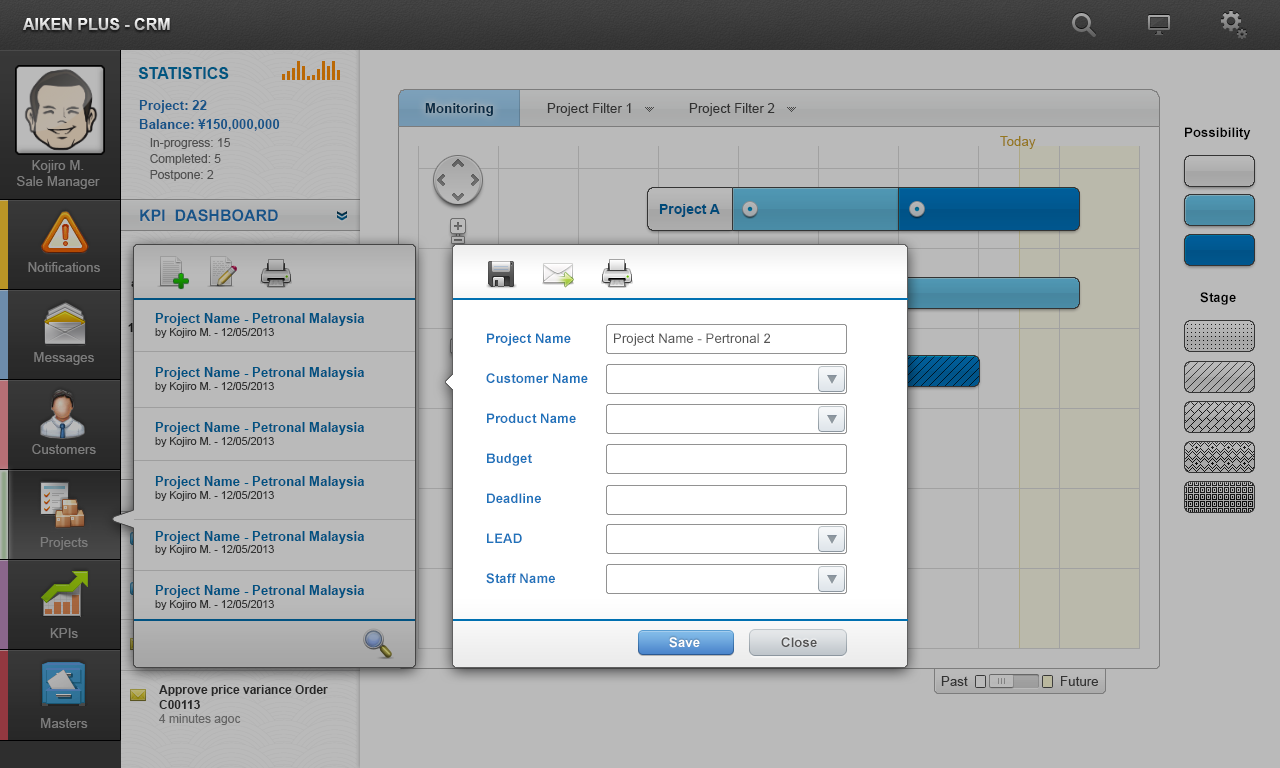
<style>
.page{position:relative;width:1280px;height:768px;background:#bababa}
.page>*{position:absolute;margin:0}
.t1{font:16px "Arial-BoldMT";text-transform:uppercase}
.t2{font:16px "Arial-BoldMT";color:#005680;text-transform:uppercase}
.t3{font:13.3px/18.7px "Arial-BoldMT"}
.t4{font:12px/18.7px "ArialMT"}
.t5{font:12px/16px "ArialMT"}
.t6{font:13.3px "Arial-BoldMT";color:#092c46}
.t7{font:13.3px "ArialMT";color:#464646}
.t8{font:13.3px "ArialMT";color:#95771f}
.t9{font:13.3px "Arial-BoldMT";color:#000000}
.t10{font:13.3px "ArialMT";color:#7c7c7c}
.t11{font:16px "Arial-BoldMT";color:#175488;text-transform:uppercase}
.t12{font:14px "Arial-BoldMT";color:#004a78}
.t13{font:13.3px "Arial-BoldMT";color:#005281}
.t14{font:10.7px "ArialMT";color:#005281}
.t15{font:13.3px/40px "Arial-BoldMT";color:#1f73bb}
.t16{font:13.3px/40px "Arial-BoldMT";color:#1f73bb;text-transform:uppercase}
.t17{font:13.3px "ArialMT";color:#555555}
.t18{font:13.3px "Arial-BoldMT";color:#ffffff}
.t19{font:13.3px "Arial-BoldMT";color:#555555}
</style>
<div class="page">
<p class="t1" style="left:23px;top:18px;width:147px;height:12px">AIKEN Plus - CRM</p>
<p class="t2" style="left:138px;top:67px;width:91px;height:12px">Statistics</p>
<p class="t3" style="left:139px;top:100px;width:141px;height:81px">Project: 22<br>Balance: ¥150,000,000<br><span class="t4">In-progress: 15<br></span><span class="t5">Completed: 5<br>Postpone: 2</span></p>
<p class="t6" style="left:425px;top:103px;width:68px;height:13px">Monitoring</p>
<p class="t7" style="left:547px;top:103px;width:84px;height:13px">Project Filter 1</p>
<p class="t7" style="left:689px;top:103px;width:86px;height:13px">Project Filter 2</p>
<p class="t8" style="left:1000px;top:136px;width:36px;height:13px">Today</p>
<p class="t9" style="left:1185px;top:127px;width:66px;height:13px">Possibility</p>
<p class="t10" style="left:17px;top:160px;width:83px;height:29px;text-align:center">Kojiro M.<br>Sale Manager</p>
<p class="t11" style="left:140px;top:209px;width:138px;height:13px">KPI  Dashboard</p>
<p class="t12" style="left:659px;top:204px;width:61px;height:13px">Project A</p>
<p class="t10" style="left:28px;top:262px;width:72px;height:10px">Notifications</p>
<p class="t9" style="left:1200px;top:292px;width:36px;height:13px">Stage</p>
<p class="t13" style="left:155px;top:313px;width:209px;height:297px">Project Name - Petronal Malaysia<br><span class="t14">by Kojiro M. - 12/05/2013<br><br><br></span>Project Name - Petronal Malaysia<br><span class="t14">by Kojiro M. - 12/05/2013<br><br><br></span>Project Name - Petronal Malaysia<br><span class="t14">by Kojiro M. - 12/05/2013<br><br><br></span>Project Name - Petronal Malaysia<br><span class="t14">by Kojiro M. - 12/05/2013<br><br><br></span>Project Name - Petronal Malaysia<br><span class="t14">by Kojiro M. - 12/05/2013<br><br><br></span>Project Name - Petronal Malaysia<br><span class="t14">by Kojiro M. - 12/05/2013</span></p>
<p class="t15" style="left:486px;top:333px;width:102px;height:251px"><span class="t16">P</span>roject Name<br>Customer Name<br>Product Name<br>Budget<br>Deadline<br>LEAD<br>Staff Name</p>
<p class="t17" style="left:614px;top:333px;width:156px;height:13px">Project Name - Pertronal 2</p>
<p class="t10" style="left:34px;top:352px;width:60px;height:13px">Messages</p>
<p class="t10" style="left:32px;top:444px;width:64px;height:10px">Customers</p>
<p class="t10" style="left:40px;top:537px;width:48px;height:13px">Projects</p>
<p class="t10" style="left:50px;top:628px;width:28px;height:10px">KPIs</p>
<p class="t18" style="left:669px;top:637px;width:31px;height:11px">Save</p>
<p class="t19" style="left:781px;top:637px;width:36px;height:10px">Close</p>
<p class="t7" style="left:941px;top:676px;width:157px;height:10px">Past      Future</p>
<p class="t10" style="left:41px;top:718px;width:47px;height:10px">Masters</p>
</div>
